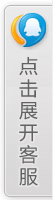
<style>
.page{position:relative;width:53px;height:200px}
.page>*{position:absolute;margin:0}
.t1{font:19px/22px "MicrosoftYaHei";color:#626262}
</style>
<div class="page">
<p class="t1" style="left:19px;top:57px;width:19px;height:129px">点<br>击<br>展<br>开<br>客<br>服</p>
</div>
